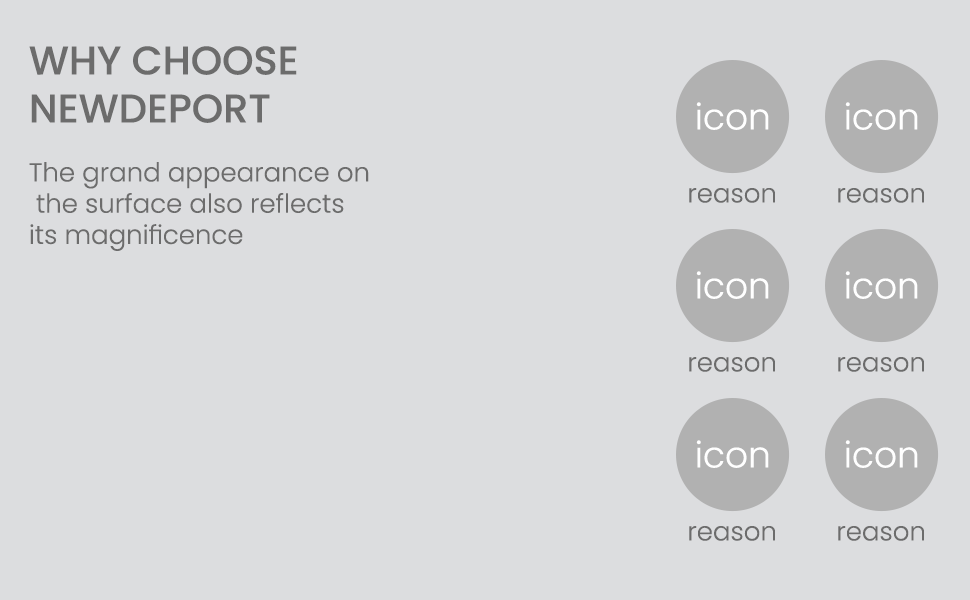
<style>
.page{position:relative;width:970px;height:600px;background:#dcdddf}
.page>*{position:absolute;margin:0}
.t1{font:40px "Poppins-Medium";color:#6c6c6c;text-transform:uppercase}
.t2{font:36px "Poppins-Light";color:#ffffff}
.t3{font:26px "Poppins-Light";color:#6c6c6c}
</style>
<div class="page">
<p class="t1" style="left:29px;top:46px;width:268px;height:77px">why choose<br>newdeport</p>
<p class="t2" style="left:696px;top:102px;width:73px;height:28px">icon</p>
<p class="t2" style="left:845px;top:102px;width:73px;height:28px">icon</p>
<p class="t3" style="left:29px;top:162px;width:340px;height:89px">The grand appearance on<br> the surface also reflects<br>its magnificence</p>
<p class="t3" style="left:689px;top:188px;width:86px;height:15px">reason</p>
<p class="t3" style="left:838px;top:188px;width:86px;height:15px">reason</p>
<p class="t2" style="left:696px;top:271px;width:73px;height:28px">icon</p>
<p class="t2" style="left:845px;top:271px;width:73px;height:28px">icon</p>
<p class="t3" style="left:689px;top:357px;width:86px;height:15px">reason</p>
<p class="t3" style="left:838px;top:357px;width:86px;height:15px">reason</p>
<p class="t2" style="left:696px;top:440px;width:73px;height:28px">icon</p>
<p class="t2" style="left:845px;top:440px;width:73px;height:28px">icon</p>
<p class="t3" style="left:689px;top:526px;width:86px;height:15px">reason</p>
<p class="t3" style="left:838px;top:526px;width:86px;height:15px">reason</p>
</div>
